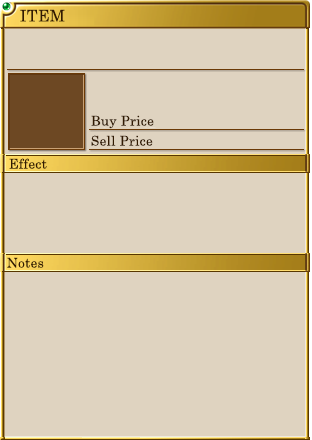
<style>
.page{position:relative;width:312px;height:440px;background:#dfd3c0}
.page>*{position:absolute;margin:0}
.t1{font:16px "CenturySchoolbook";letter-spacing:0.025em;color:#321a02}
.t2{font:13.3px "CenturySchoolbook";letter-spacing:0.025em;color:#321a02}
</style>
<div class="page">
<p class="t1" style="left:20px;top:9px;width:45px;height:13px">ITEM</p>
<p class="t2" style="left:91px;top:115px;width:63px;height:14px">Buy Price</p>
<p class="t2" style="left:91px;top:135px;width:62px;height:11px">Sell Price</p>
<p class="t2" style="left:9px;top:158px;width:38px;height:11px">Effect</p>
<p class="t2" style="left:7px;top:257px;width:37px;height:11px">Notes</p>
</div>
